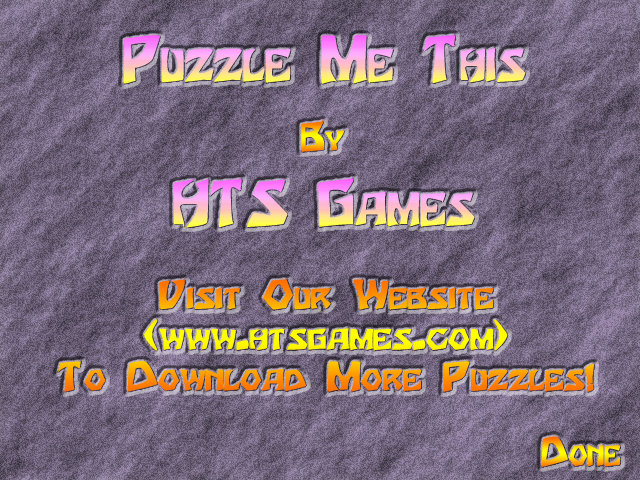
<style>
.page{position:relative;width:640px;height:480px}
.page>*{position:absolute;margin:0}
.t1{font:54px "Houters-Normal";font-variant:small-caps;font-weight:bold}
.t2{font:34px "Houters-Normal";font-variant:small-caps;font-weight:bold}
.t3{font:34px "Houters-Normal";font-variant:small-caps;font-weight:bold;scale:1.14 1}
</style>
<div class="page">
<p class="t1" style="left:123px;top:35px;width:403px;height:49px">Puzzle Me This</p>
<p class="t2" style="left:301px;top:119px;width:44px;height:33px">By</p>
<p class="t1" style="left:173px;top:177px;width:302px;height:52px">HTS Games</p>
<p class="t3" style="left:58px;top:279px;width:536px;height:114px;text-align:center">Visit Our Website <br>(www.htsgames.com)<br>To Download More Puzzles!</p>
<p class="t2" style="left:541px;top:436px;width:80px;height:31px">Done</p>
</div>
